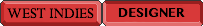
<style>
.page{position:relative;width:203px;height:26px;background:#d83939}
.page>*{position:absolute;margin:0}
.t1{font:16px "Perpetua";color:#000000}
.t2{font:12px "MyanmarMN-Bold";color:#000000}
</style>
<div class="page">
<p class="t1" style="left:7px;top:8px;width:87px;height:11px">WEST INDIES</p>
<p class="t2" style="left:118px;top:7px;width:67px;height:11px">DESIGNER</p>
</div>
